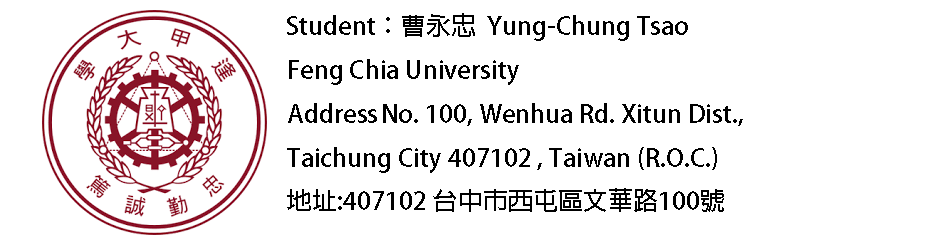
<style>
.page{position:relative;width:942px;height:248px;background:#ffffff}
.page>*{position:absolute;margin:0}
.t1{font:25px "AdobeFanHeitiStd-Bold";color:#000000}
</style>
<div class="page">
<p class="t1" style="left:287px;top:13px;width:401px;height:28px">Student：曹永忠  Yung-Chung Tsao</p>
<p class="t1" style="left:287px;top:59px;width:456px;height:153px">Feng Chia University<br>Address No. 100, Wenhua Rd. Xitun Dist., <br>Taichung City 407102 , Taiwan (R.O.C.)<br>地址:407102 台中市西屯區文華路100號</p>
</div>
